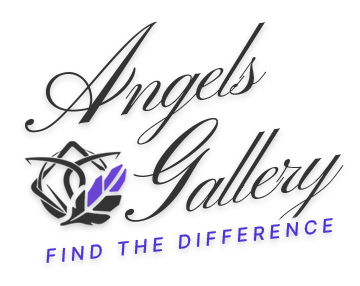
<style>
.page{position:relative;width:360px;height:286px;background:#ffffff}
.page>*{position:absolute;margin:0}
.t1{font:85.4px/108.8px "PinyonScript-Regular";letter-spacing:-0.04em;color:#333333}
.t2{font:127.3px/108.8px "PinyonScript-Regular";letter-spacing:-0.04em;color:#333333}
.t3{font:19.5px "PretendardVariable-Medium";letter-spacing:0.26em;color:#4d36d0;text-transform:uppercase}
</style>
<div class="page">
<p class="t1" style="left:25px;top:21px;width:319px;height:206px;text-align:center;rotate:-11deg"><span class="t2">A</span>ngels <br><span class="t2">      G</span>allery</p>
<p class="t3" style="left:46px;top:218px;width:287px;height:45px;rotate:-6deg">Find the difference</p>
<p class="t3" style="left:46px;top:218px;width:287px;height:45px;rotate:-6deg">Find the difference</p>
</div>
